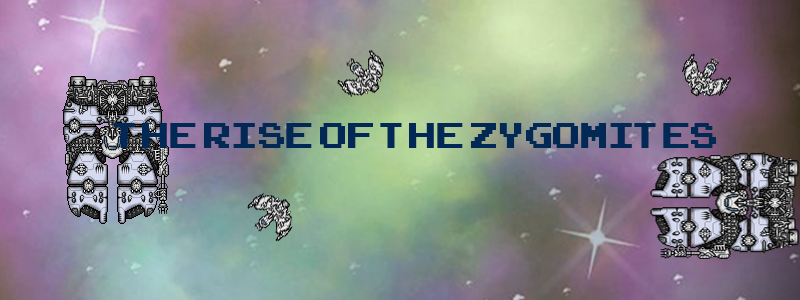
<style>
.page{position:relative;width:800px;height:300px}
.page>*{position:absolute;margin:0}
.t1{font:50px "ArcadeClassic";color:#022955}
</style>
<div class="page">
<p class="t1" style="left:113px;top:123px;width:603px;height:25px">The rise of the zygomites</p>
</div>
